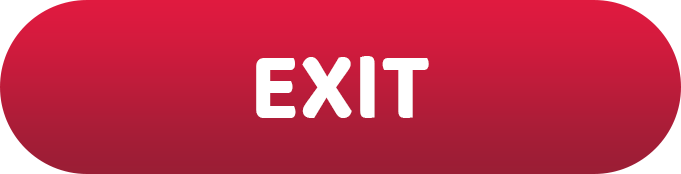
<style>
.page{position:relative;width:681px;height:174px}
.page>*{position:absolute;margin:0}
.t1{font:98.5px "BalooThambi2-Bold";color:#ffffff;scale:0.91 1}
</style>
<div class="page">
<p class="t1" style="left:256px;top:56px;width:173px;height:62px">EXIT</p>
</div>
